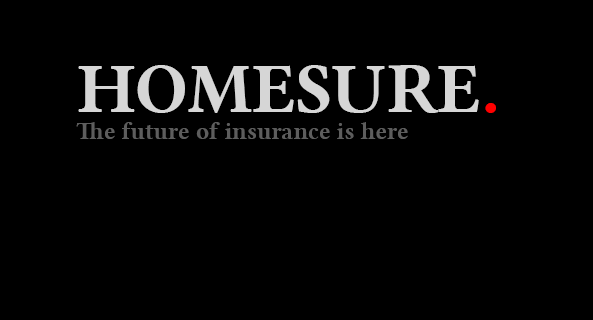
<style>
.page{position:relative;width:593px;height:320px;background:#000000}
.page>*{position:absolute;margin:0}
.t1{font:72px "LinLibertineB";color:#d6d6d6}
.t2{font:72px "LinLibertineB";color:#ff0000}
.t3{font:24px "LinLibertineB";color:#5d5d5d}
</style>
<div class="page">
<p class="t1" style="left:78px;top:65px;width:418px;height:48px">HOMESURE<span class="t2">.</span></p>
<p class="t3" style="left:76px;top:122px;width:332px;height:17px">The future of insurance is here</p>
</div>
